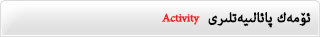
<style>
.page{position:relative;width:320px;height:37px}
.page>*{position:absolute;margin:0}
.t1{font:16px "AdobeArabic-Regular";letter-spacing:-0.02em;color:#f2202b;font-weight:bold}
.t2{font:19.2px "AdobeArabic-Regular";color:#020202;font-weight:bold}
</style>
<div class="page">
<p class="t1" style="left:162px;top:13px;width:38px;height:12px">Activity</p>
<p class="t2" style="left:208px;top:12px;width:103px;height:16px">ئۆمەك پائالىيەتلىرى</p>
</div>
